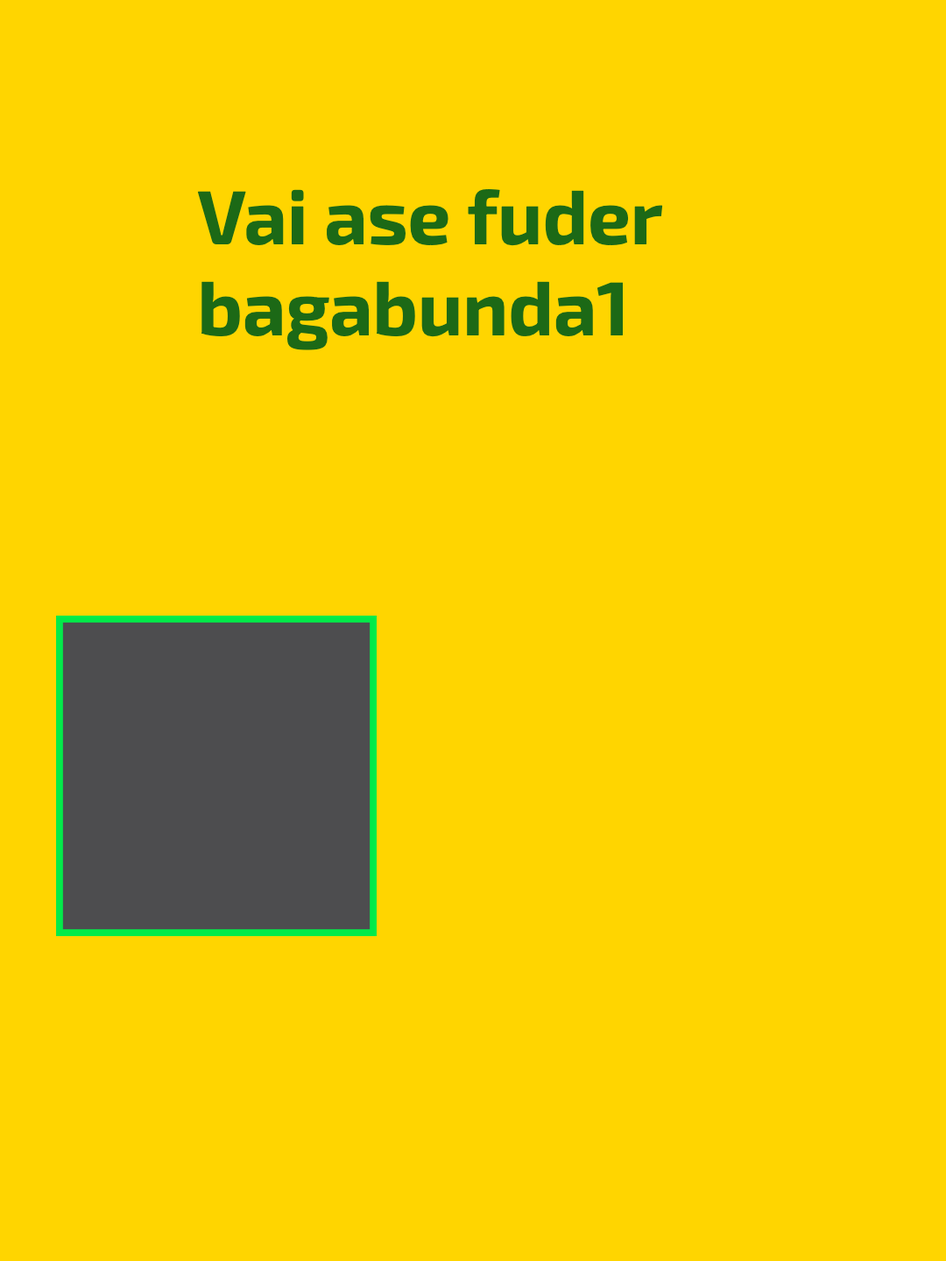
<style>
.page{position:relative;width:946px;height:1261px;background:#ffd500}
.page>*{position:absolute;margin:0}
.t1{font:76.2px/91.1px "Exo2-Bold";color:#1c6916}
</style>
<div class="page">
<p class="t1" style="left:197px;top:185px;width:553px;height:167px">Vai ase fuder<br>bagabunda1</p>
</div>
